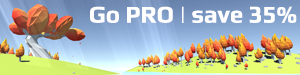
<style>
.page{position:relative;width:300px;height:75px}
.page>*{position:absolute;margin:0}
.t1{font:24px "Play-Bold";color:#fffefe}
</style>
<div class="page">
<p class="t1" style="left:90px;top:6px;width:207px;height:17px">Go PRO | save 35%</p>
</div>
